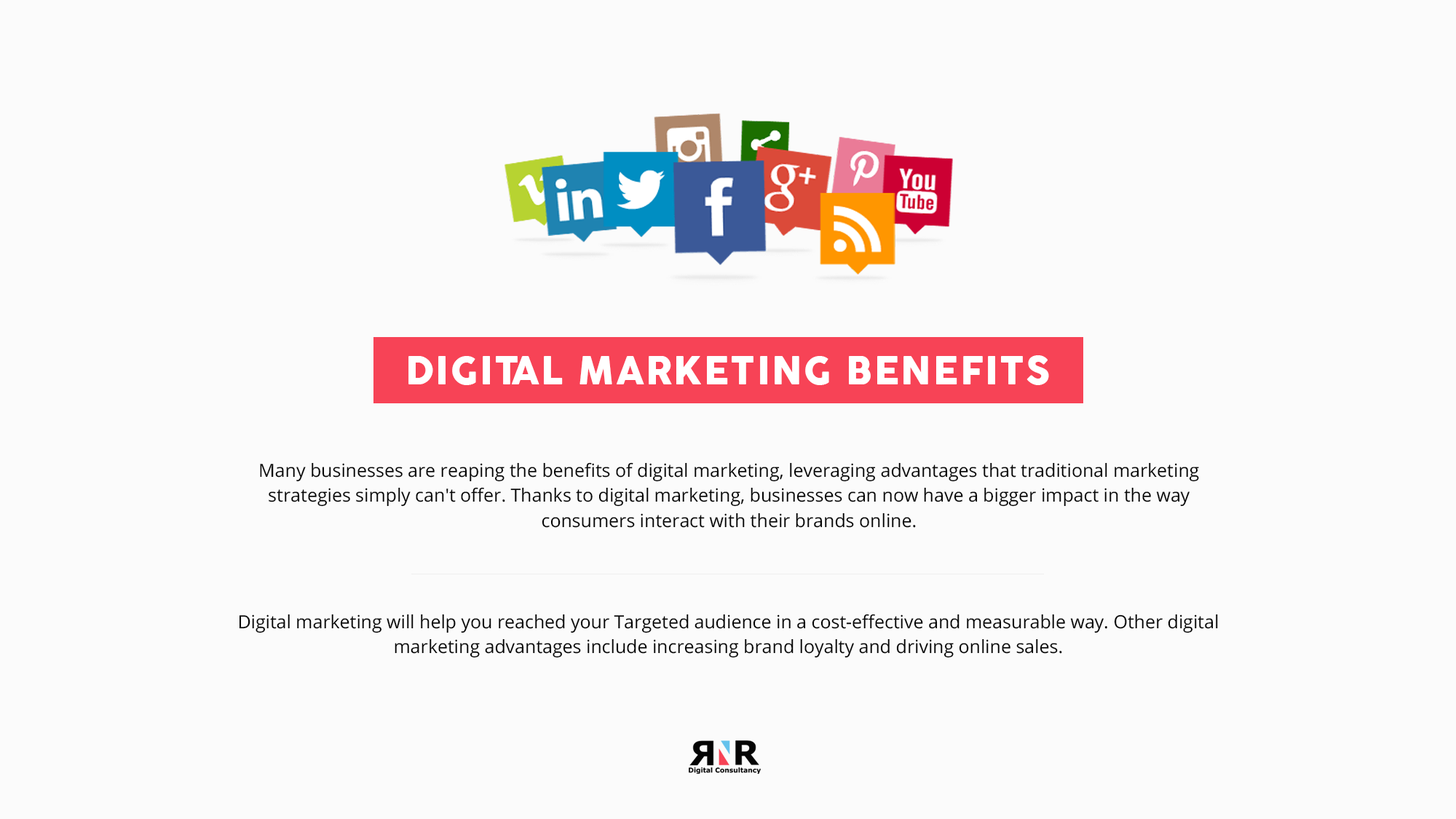
<style>
.page{position:relative;width:1456px;height:819px;background:#fbfbfb}
.page>*{position:absolute;margin:0}
.t1{font:37.7px "CocoGothic-Heavy";letter-spacing:0.04em;color:#ffffff;text-transform:uppercase}
.t2{font:18.2px/25.1px "OpenSans";color:#050505}
</style>
<div class="page">
<p class="t1" style="left:408px;top:355px;width:641px;height:30px">Digital Marketing Benefits</p>
<p class="t2" style="left:260px;top:462px;width:939px;height:66px;text-align:center">Many businesses are reaping the benefits of digital marketing, leveraging advantages that traditional marketing strategies simply can't offer. Thanks to digital marketing, businesses can now have a bigger impact in the way consumers interact with their brands online.</p>
<p class="t2" style="left:239px;top:614px;width:979px;height:44px;text-align:center">Digital marketing will help you reached your Targeted audience in a cost-effective and measurable way. Other digital marketing advantages include increasing brand loyalty and driving online sales.</p>
</div>
